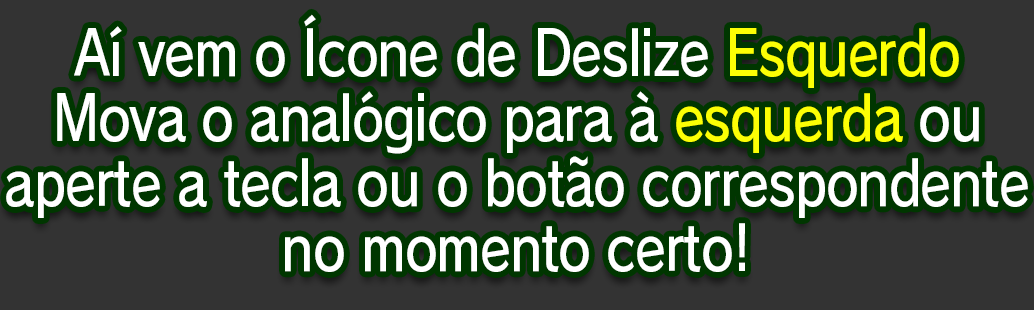
<style>
.page{position:relative;width:1034px;height:310px;background:#333333}
.page>*{position:absolute;margin:0}
.t1{font:61.3px/65.2px "RodinPro-DB";letter-spacing:-0.022em;color:#ffffff;scale:0.84 1}
.t2{font:61.3px/65.2px "RodinPro-DB";letter-spacing:-0.022em;color:#fcff05;scale:0.84 1}
</style>
<div class="page">
<p class="t1" style="left:6px;top:14px;width:1022px;height:258px;text-align:center">Aí vem o Ícone de Deslize <span class="t2">Esquerdo<br></span>Mova o analógico para à <span class="t2">esquerda</span> ou<br>aperte a tecla ou o botão correspondente<br>no momento certo!</p>
</div>
